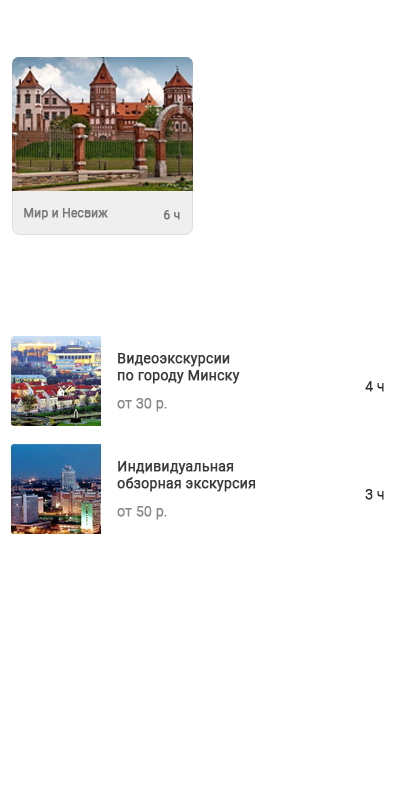
<style>
.page{position:relative;width:400px;height:800px;background:#ffffff}
.page>*{position:absolute;margin:0}
.t1{font:11.9px "Roboto-Regular";color:#787878;font-weight:bold}
.t2{font:13.9px "Roboto-Regular";color:#393939;font-weight:bold}
.t3{font:13.9px "Roboto-Light";color:#2f2f2f;font-weight:bold}
.t4{font:13.9px "Roboto-Light";color:#898989;font-weight:bold}
</style>
<div class="page">
<p class="t1" style="left:24px;top:208px;width:84px;height:12px">Мир и Несвиж</p>
<p class="t1" style="left:163px;top:210px;width:17px;height:10px">6 ч</p>
<p class="t2" style="left:117px;top:353px;width:123px;height:31px">Видеоэкскурсии <br>по городу Минску</p>
<p class="t3" style="left:365px;top:381px;width:19px;height:11px">4 ч</p>
<p class="t4" style="left:117px;top:398px;width:50px;height:14px">от 30 р.</p>
<p class="t2" style="left:117px;top:461px;width:139px;height:31px">Индивидуальная<br>обзорная экскурсия</p>
<p class="t3" style="left:365px;top:489px;width:19px;height:11px">3 ч</p>
<p class="t4" style="left:117px;top:506px;width:50px;height:14px">от 50 р.</p>
</div>
